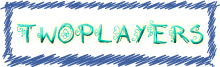
<style>
.page{position:relative;width:220px;height:67px;background:#ffffff}
.page>*{position:absolute;margin:0}
.t1{font:16px "Initialized"}
</style>
<div class="page">
<p class="t1" style="left:16px;top:20px;width:188px;height:25px">TWOPLAYERS</p>
</div>
